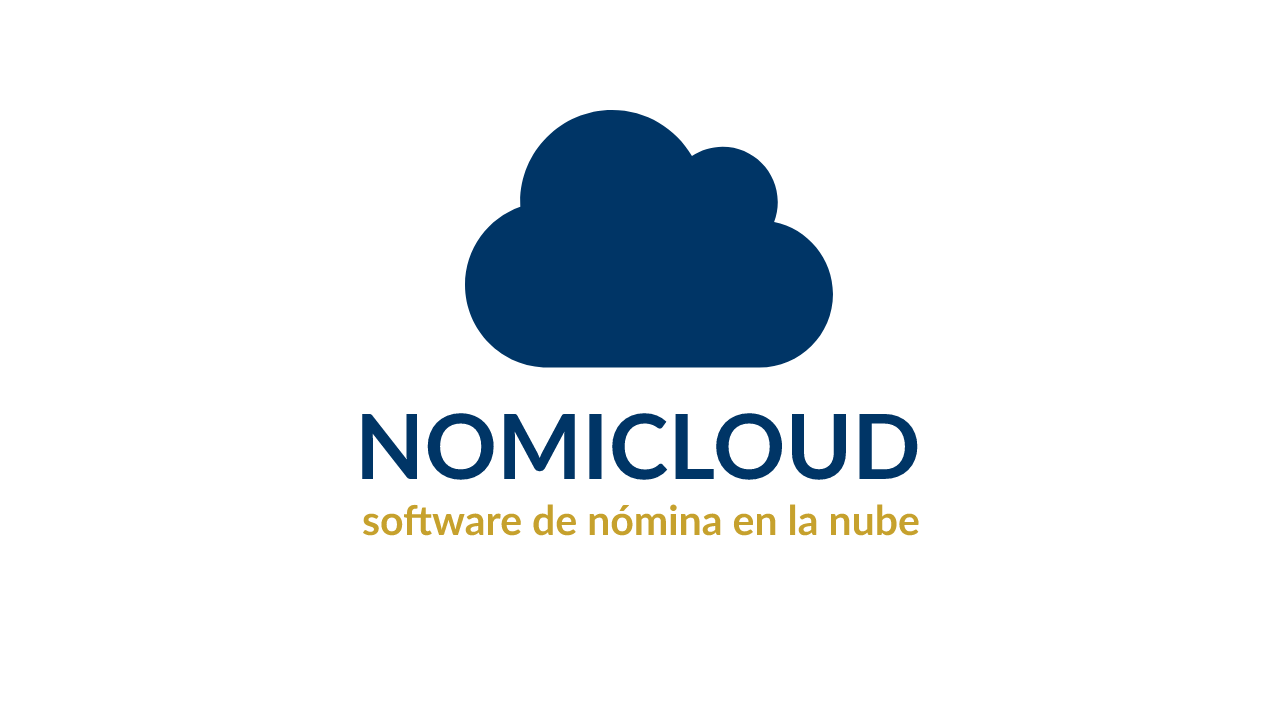
<style>
.page{position:relative;width:1280px;height:720px;background:#ffffff}
.page>*{position:absolute;margin:0}
.t1{font:90px "Lato-Bold";color:#003566}
.t2{font:41px "Lato-Bold";color:#c6a12d}
</style>
<div class="page">
<p class="t1" style="left:362px;top:413px;width:556px;height:67px">NOMICLOUD</p>
<p class="t2" style="left:363px;top:504px;width:556px;height:32px">software de nómina en la nube</p>
</div>
